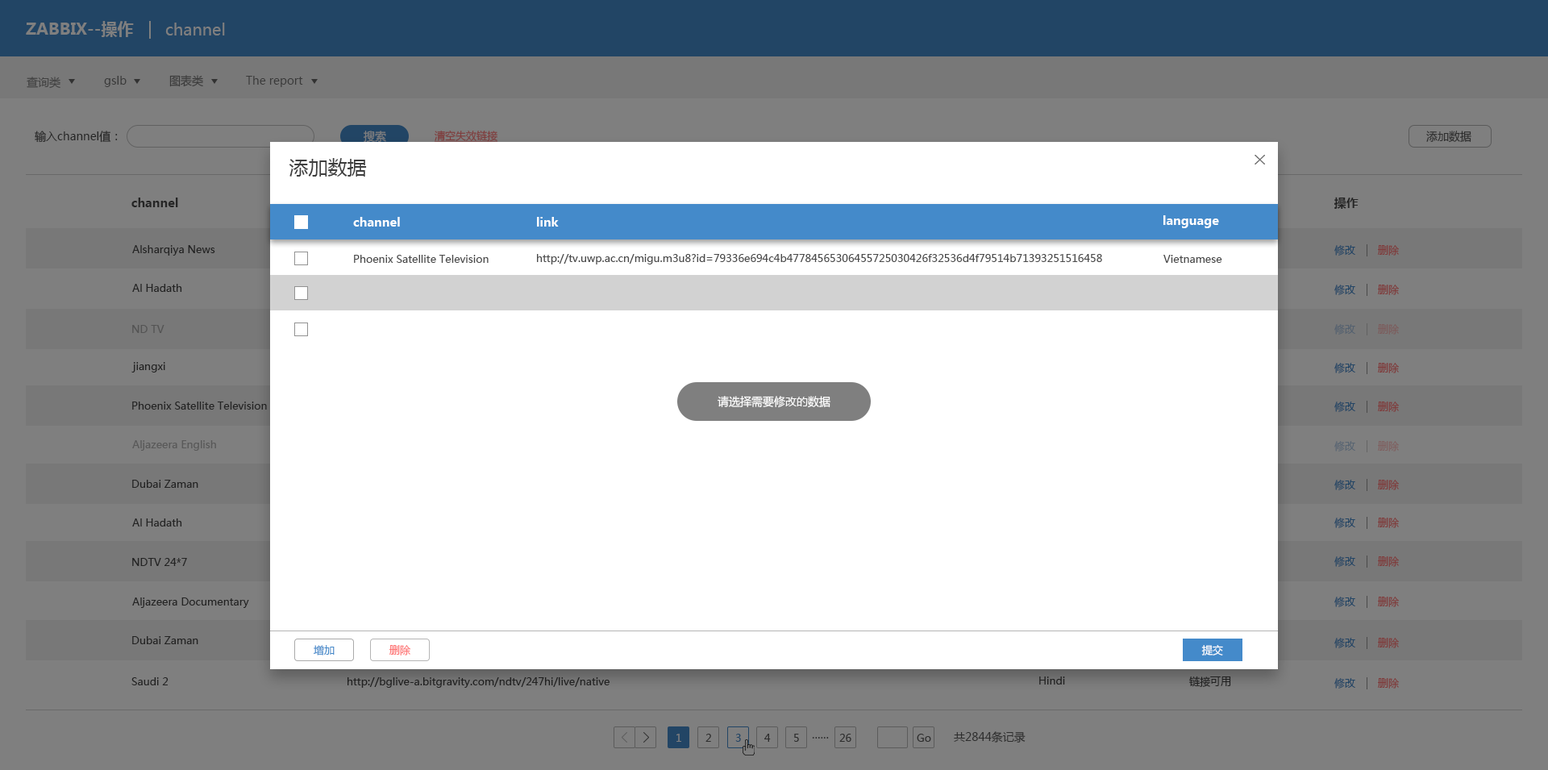
<style>
.page{position:relative;width:1548px;height:770px;background:#ffffff}
.page>*{position:absolute;margin:0}
.t1{font:16.1px "MicrosoftYaHei-Bold";color:#7f7f7f}
.t2{font:16.1px "MicrosoftYaHei";color:#7f7f7f}
.t3{font:11.3px "MicrosoftYaHei";color:#3b3b3b}
.t4{font:11.3px "MicrosoftYaHei";color:#3a3a3a}
.t5{font:11.3px "MicrosoftYaHei";color:#252525}
.t6{font:10.5px "MicrosoftYaHei";color:#7e3c3c;text-decoration:underline}
.t7{font:11.3px "MicrosoftYaHei";color:#2e2e2e}
.t8{font:19.4px "MicrosoftYaHei";color:#3e3e3e}
.t9{font:12.1px "MicrosoftYaHei-Bold";color:#252525}
.t10{font:12.1px "MicrosoftYaHei-Bold";color:#ffffff}
.t11{font:10.5px "MicrosoftYaHei";color:#232323}
.t12{font:10.5px "MicrosoftYaHei";color:#224565}
.t13{font:10.5px "MicrosoftYaHei";color:#7f3c3c}
.t14{font:10.5px "MicrosoftYaHei";color:#4a4a4a}
.t15{font:10.5px "MicrosoftYaHei";color:#464646}
.t16{font:10.5px "MicrosoftYaHei";color:#54616f}
.t17{font:10.5px "MicrosoftYaHei";color:#7c5d5d}
.t18{font:11.3px "MicrosoftYaHei";color:#ffffff}
.t19{font:10.5px "MicrosoftYaHei";color:#586572}
.t20{font:10.5px "MicrosoftYaHei";color:#7f6161}
.t21{font:10.5px "MicrosoftYaHei";color:#448aca}
.t22{font:10.5px "MicrosoftYaHei";color:#fe7878}
.t23{font:10.5px "MicrosoftYaHei";color:#ffffff}
.t24{font:10.5px "MicrosoftYaHei";color:#212121}
.t25{font:10.5px "MicrosoftYaHei";color:#202020}
.t26{font:10.5px "MicrosoftYaHei";color:#1f1f1f}
.t27{font:10.5px "MicrosoftYaHei";color:#7f7f7f}
.t28{font:10.5px "MicrosoftYaHei";color:#2d2d2d}
.t29{font:11.3px "MicrosoftYaHei";color:#2d2d2d}
</style>
<div class="page">
<p class="t1" style="left:26px;top:21px;width:108px;height:16px">ZABBIX--操作</p>
<p class="t2" style="left:165px;top:23px;width:60px;height:12px">channel</p>
<p class="t3" style="left:27px;top:77px;width:33px;height:12px;opacity:0.7">查询类</p>
<p class="t4" style="left:104px;top:76px;width:23px;height:11px">gslb</p>
<p class="t4" style="left:169px;top:75px;width:34px;height:12px">图表类</p>
<p class="t4" style="left:246px;top:76px;width:57px;height:11px">The report</p>
<p class="t5" style="left:35px;top:131px;width:83px;height:12px">输入channel值：</p>
<p class="t6" style="left:435px;top:130px;width:63px;height:12px">清空失效链接</p>
<p class="t7" style="left:1427px;top:131px;width:45px;height:12px">添加数据</p>
<p class="t8" style="left:289px;top:158px;width:78px;height:19px">添加数据</p>
<p class="t9" style="left:131px;top:198px;width:47px;height:9px">channel</p>
<p class="t9" style="left:1335px;top:197px;width:24px;height:12px">操作</p>
<p class="t10" style="left:353px;top:217px;width:47px;height:10px">channel</p>
<p class="t10" style="left:537px;top:217px;width:22px;height:10px">link</p>
<p class="t10" style="left:1164px;top:215px;width:55px;height:13px">language</p>
<p class="t11" style="left:132px;top:245px;width:83px;height:11px">Alsharqiya News</p>
<p class="t12" style="left:1335px;top:245px;width:21px;height:11px">修改</p>
<p class="t13" style="left:1378px;top:245px;width:21px;height:11px">删除</p>
<p class="t14" style="left:354px;top:255px;width:135px;height:8px">Phoenix Satellite Television</p>
<p class="t14" style="left:537px;top:254px;width:565px;height:11px">http://tv.uwp.ac.cn/migu.m3u8?id=79336e694c4b47784565306455725030426f32536d4f79514b71393251516458</p>
<p class="t14" style="left:1164px;top:255px;width:59px;height:8px">Vietnamese</p>
<p class="t11" style="left:132px;top:284px;width:50px;height:8px">Al Hadath</p>
<p class="t12" style="left:1335px;top:285px;width:21px;height:10px">修改</p>
<p class="t13" style="left:1378px;top:285px;width:21px;height:10px">删除</p>
<p class="t15" style="left:132px;top:325px;width:33px;height:8px;opacity:0.5">ND TV</p>
<p class="t16" style="left:1335px;top:324px;width:21px;height:11px">修改</p>
<p class="t17" style="left:1378px;top:324px;width:21px;height:11px">删除</p>
<p class="t11" style="left:131px;top:362px;width:34px;height:11px">jiangxi</p>
<p class="t12" style="left:1335px;top:363px;width:21px;height:10px">修改</p>
<p class="t13" style="left:1378px;top:363px;width:21px;height:10px">删除</p>
<p class="t11" style="left:132px;top:402px;width:135px;height:8px">Phoenix Satellite Television</p>
<p class="t18" style="left:718px;top:396px;width:113px;height:12px">请选择需要修改的数据</p>
<p class="t12" style="left:1335px;top:402px;width:21px;height:10px">修改</p>
<p class="t13" style="left:1378px;top:402px;width:21px;height:10px">删除</p>
<p class="t15" style="left:132px;top:440px;width:84px;height:11px;opacity:0.5">Aljazeera English</p>
<p class="t19" style="left:1335px;top:441px;width:21px;height:11px">修改</p>
<p class="t20" style="left:1378px;top:441px;width:21px;height:11px">删除</p>
<p class="t11" style="left:132px;top:480px;width:66px;height:8px">Dubai Zaman</p>
<p class="t12" style="left:1335px;top:480px;width:21px;height:10px">修改</p>
<p class="t13" style="left:1378px;top:480px;width:21px;height:10px">删除</p>
<p class="t11" style="left:132px;top:519px;width:50px;height:8px">Al Hadath</p>
<p class="t12" style="left:1335px;top:518px;width:21px;height:10px">修改</p>
<p class="t13" style="left:1378px;top:518px;width:21px;height:10px">删除</p>
<p class="t12" style="left:1335px;top:556px;width:21px;height:11px">修改</p>
<p class="t13" style="left:1378px;top:556px;width:21px;height:11px">删除</p>
<p class="t11" style="left:132px;top:558px;width:55px;height:8px">NDTV 24*7</p>
<p class="t11" style="left:132px;top:598px;width:117px;height:10px">Aljazeera Documentary</p>
<p class="t12" style="left:1335px;top:597px;width:21px;height:10px">修改</p>
<p class="t13" style="left:1378px;top:597px;width:21px;height:10px">删除</p>
<p class="t11" style="left:132px;top:636px;width:66px;height:8px">Dubai Zaman</p>
<p class="t12" style="left:1335px;top:638px;width:21px;height:10px">修改</p>
<p class="t13" style="left:1378px;top:638px;width:21px;height:10px">删除</p>
<p class="t21" style="left:314px;top:645px;width:21px;height:11px">增加</p>
<p class="t22" style="left:390px;top:645px;width:20px;height:11px">删除</p>
<p class="t23" style="left:1202px;top:645px;width:21px;height:11px">提交</p>
<p class="t11" style="left:131px;top:677px;width:38px;height:8px">Saudi 2</p>
<p class="t24" style="left:348px;top:677px;width:262px;height:11px">http://bglive-a.bitgravity.com/ndtv/247hi/live/native</p>
<p class="t25" style="left:1039px;top:677px;width:26px;height:8px">Hindi</p>
<p class="t26" style="left:1189px;top:676px;width:42px;height:11px">链接可用</p>
<p class="t12" style="left:1335px;top:678px;width:21px;height:11px">修改</p>
<p class="t13" style="left:1378px;top:678px;width:21px;height:11px">删除</p>
<p class="t27" style="left:677px;top:734px;width:4px;height:8px">1</p>
<p class="t28" style="left:706px;top:734px;width:5px;height:8px">2</p>
<p class="t12" style="left:735px;top:734px;width:6px;height:8px">3</p>
<p class="t28" style="left:764px;top:734px;width:7px;height:8px">4</p>
<p class="t28" style="left:794px;top:734px;width:5px;height:8px">5</p>
<p class="t28" style="left:812px;top:737px;width:17px;height:2px">……</p>
<p class="t28" style="left:839px;top:734px;width:13px;height:8px">26</p>
<p class="t28" style="left:917px;top:734px;width:14px;height:8px">Go</p>
<p class="t29" style="left:954px;top:731px;width:72px;height:12px">共2844条记录</p>
</div>
